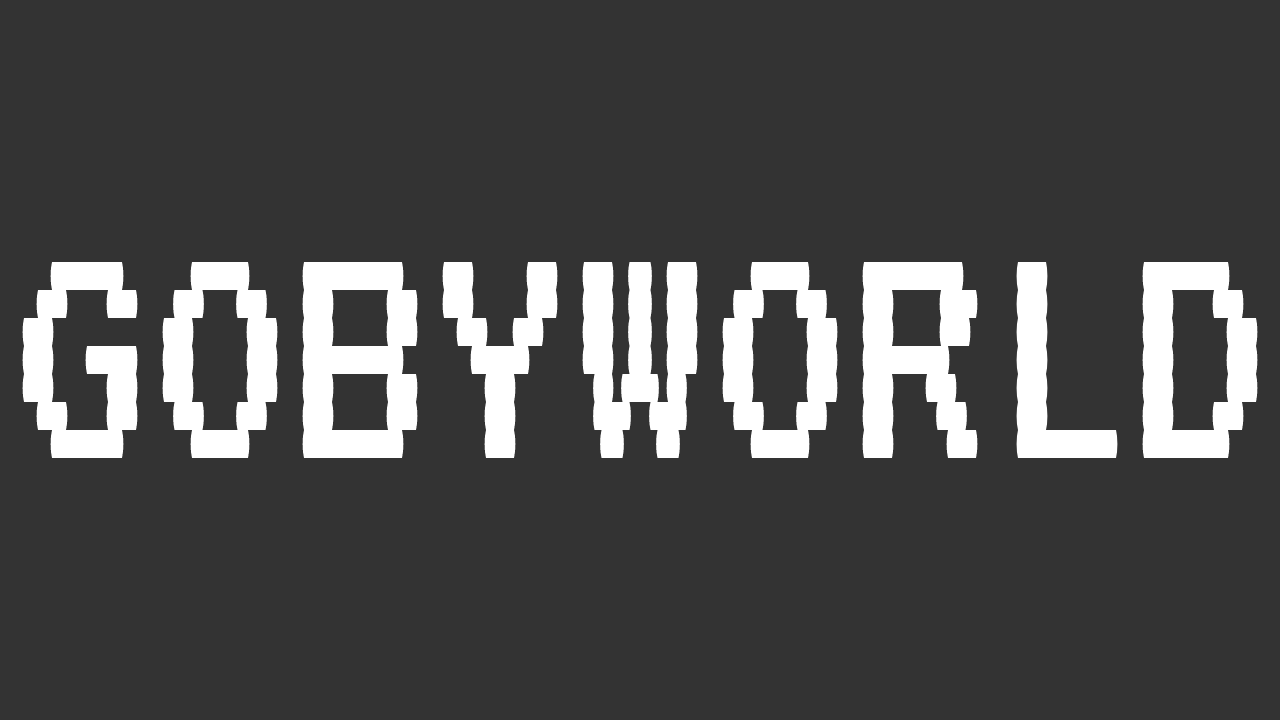
<style>
.page{position:relative;width:1280px;height:720px;background:#333333}
.page>*{position:absolute;margin:0}
.t1{font:350px "VT323-Regular";color:#ffffff}
</style>
<div class="page">
<p class="t1" style="left:22px;top:262px;width:1236px;height:196px">GOBYWORLD</p>
</div>
